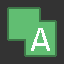
<style>
.page{position:relative;width:64px;height:64px;background:#333333}
.page>*{position:absolute;margin:0}
.t1{font:36px "Consolas";color:#ffffff}
</style>
<div class="page">
<p class="t1" style="left:31px;top:28px;width:19px;height:23px">A</p>
</div>
